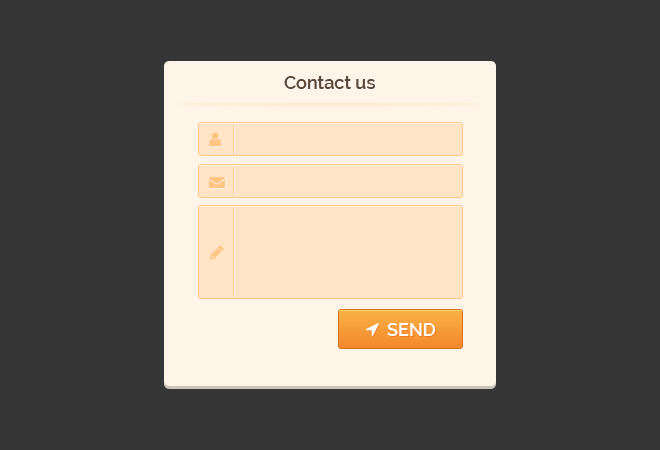
<style>
.page{position:relative;width:660px;height:450px;background:#363636}
.page>*{position:absolute;margin:0}
.t1{font:18px "Raleway-SemiBold";color:#594838}
.t2{font:18px "Raleway-SemiBold";color:#ffffff}
</style>
<div class="page">
<p class="t1" style="left:284px;top:76px;width:91px;height:13px">Contact us</p>
<p class="t2" style="left:387px;top:323px;width:49px;height:13px">SEND</p>
</div>
